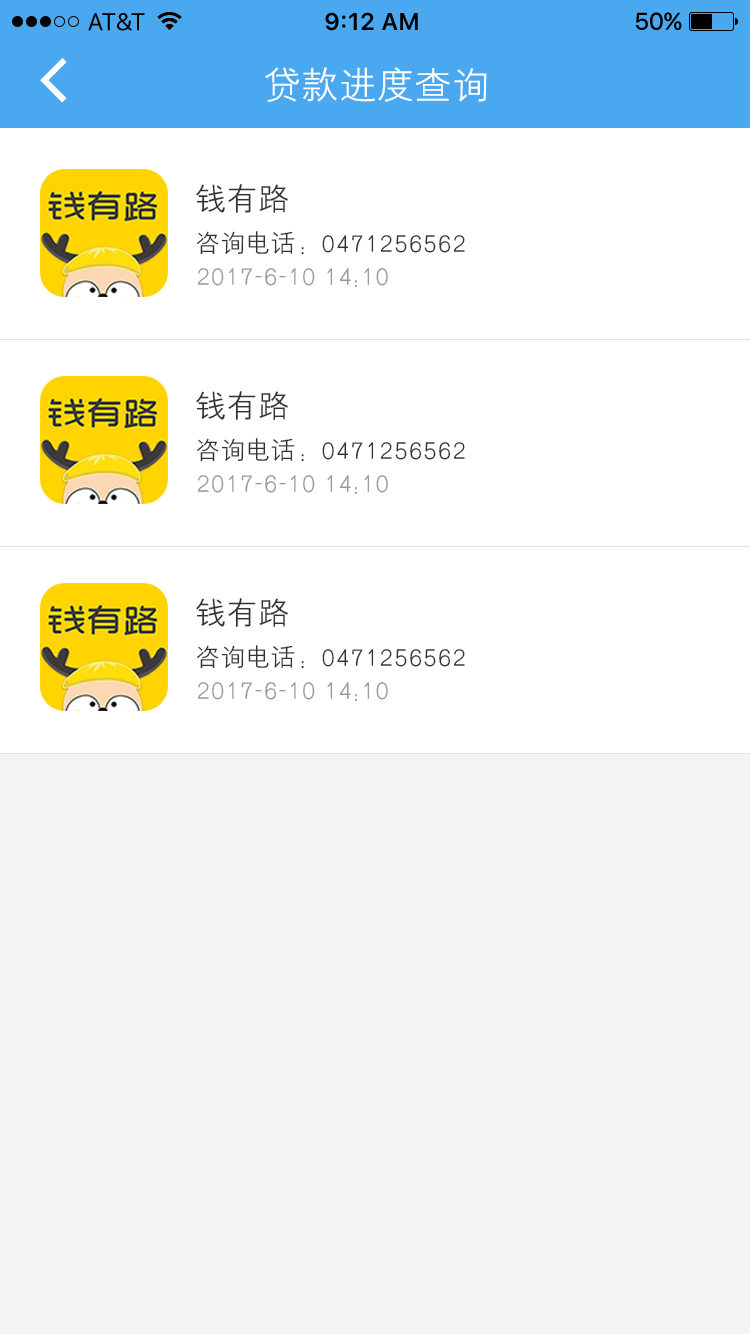
<style>
.page{position:relative;width:750px;height:1334px;background:#f3f3f3}
.page>*{position:absolute;margin:0}
.t1{font:36px "HYZhongJianHeiJ";letter-spacing:0.05em;color:#ffffff}
.t2{font:30px "HYZhongJianHeiJ";letter-spacing:0.05em;color:#333333}
.t3{font:24px "HYZhongJianHeiJ";letter-spacing:0.05em;color:#333333}
.t4{font:24px "HYZhongJianHeiJ";letter-spacing:0.05em;color:#999999}
</style>
<div class="page">
<p class="t1" style="left:265px;top:67px;width:222px;height:35px">贷款进度查询</p>
<p class="t2" style="left:196px;top:184px;width:92px;height:29px">钱有路</p>
<p class="t3" style="left:196px;top:231px;width:269px;height:24px">咨询电话：0471256562</p>
<p class="t4" style="left:197px;top:268px;width:191px;height:20px">2017-6-10 14:10</p>
<p class="t2" style="left:196px;top:391px;width:92px;height:29px">钱有路</p>
<p class="t3" style="left:196px;top:438px;width:269px;height:24px">咨询电话：0471256562</p>
<p class="t4" style="left:197px;top:475px;width:191px;height:20px">2017-6-10 14:10</p>
<p class="t2" style="left:196px;top:598px;width:92px;height:29px">钱有路</p>
<p class="t3" style="left:196px;top:645px;width:269px;height:24px">咨询电话：0471256562</p>
<p class="t4" style="left:197px;top:682px;width:191px;height:20px">2017-6-10 14:10</p>
</div>
